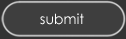
<style>
.page{position:relative;width:126px;height:39px;background:#3e3e3e}
.page>*{position:absolute;margin:0}
.t1{font:14px "CenturyGothic";color:#ffffff}
</style>
<div class="page">
<p class="t1" style="left:40px;top:13px;width:44px;height:12px">submit</p>
</div>
